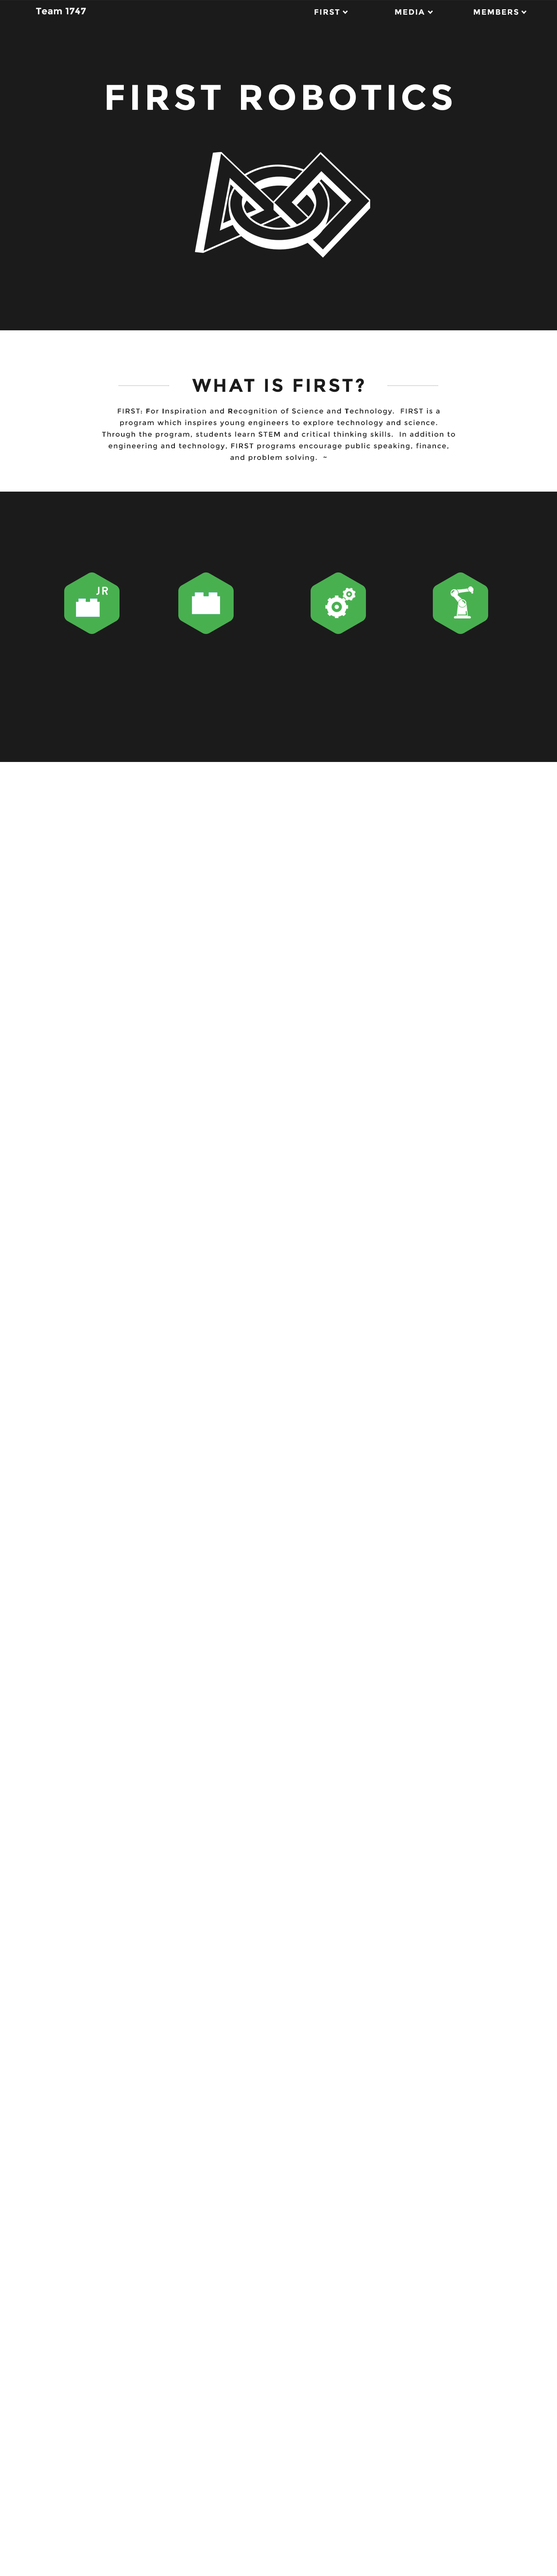
<style>
.page{position:relative;width:557px;height:2576px;background:#ffffff}
.page>*{position:absolute;margin:0}
.t1{font:9.3px "Montserrat-Bold";letter-spacing:0.025em;color:#f6f6f6}
.t2{font:7.7px "Montserrat-Bold";letter-spacing:0.1em;color:#f6f6f6}
.t3{font:35.6px "Montserrat-Bold";letter-spacing:0.1em;color:#ffffff}
.t4{font:18.6px "Montserrat-Bold";letter-spacing:0.1em;color:#1b1b1b}
.t5{font:7px/11.6px "Montserrat-Regular";letter-spacing:0.1em;color:#1b1b1b}
.t6{font:7px/11.6px "Montserrat-Bold";letter-spacing:0.1em;color:#1b1b1b}
.t7{font:11.6px "Moon-Bold";letter-spacing:0.1em;color:#ffffff}
</style>
<div class="page">
<p class="t1" style="left:36px;top:8px;width:50px;height:7px">Team 1747</p>
<p class="t2" style="left:314px;top:9px;width:26px;height:6px">FIRST</p>
<p class="t2" style="left:395px;top:9px;width:29px;height:6px">MEDIA</p>
<p class="t2" style="left:474px;top:9px;width:44px;height:6px">MEMBERS</p>
<p class="t3" style="left:107px;top:84px;width:345px;height:26px">FIRST ROBOTICS</p>
<p class="t4" style="left:192px;top:378px;width:172px;height:14px">WHAT IS FIRST?</p>
<p class="t5" style="left:102px;top:408px;width:353px;height:53px;text-align:center">FIRST: <span class="t6">F</span>or <span class="t6">I</span>nspiration and <span class="t6">R</span>ecognition of Science and <span class="t6">T</span>echnology.  FIRST is a program which inspires young engineers to explore technology and science.  Through the program, students learn STEM and critical thinking skills.  In addition to engineering and technology, FIRST programs encourage public speaking, finance, and problem solving.  ~</p>
<p class="t7" style="left:96px;top:587px;width:12px;height:8px">JR</p>
</div>
